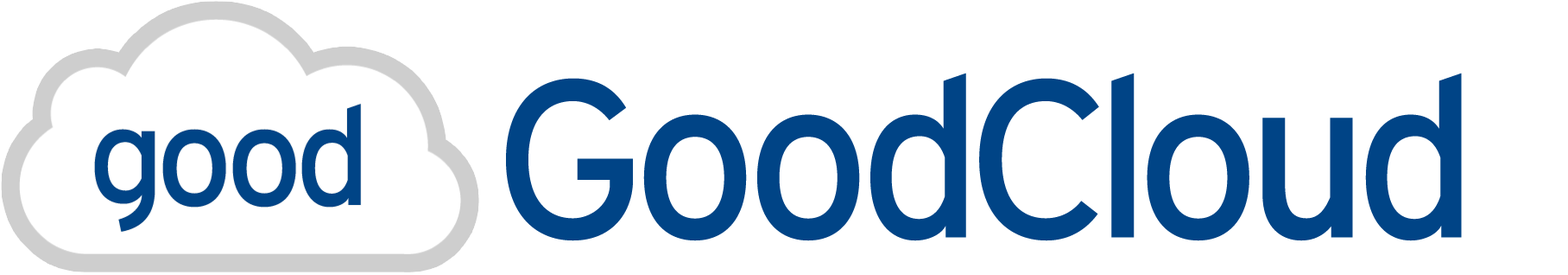
<style>
.page{position:relative;width:1568px;height:275px;background:#ffffff}
.page>*{position:absolute;margin:0}
.t1{font:224.5px "ExpresswayRg-Regular";color:#004486}
.t2{font:138.2px "ExpresswayRg-Regular";color:#004486}
</style>
<div class="page">
<p class="t1" style="left:506px;top:73px;width:956px;height:168px">GoodCloud</p>
<p class="t2" style="left:94px;top:104px;width:267px;height:127px">good</p>
</div>
